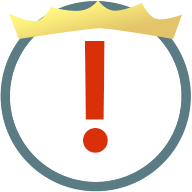
<style>
.page{position:relative;width:192px;height:192px;background:#ffffff}
.page>*{position:absolute;margin:0}
.t1{font:157.2px "Europa-Bold";color:#d93009}
</style>
<div class="page">
<p class="t1" style="left:83px;top:41px;width:25px;height:112px">!</p>
</div>
